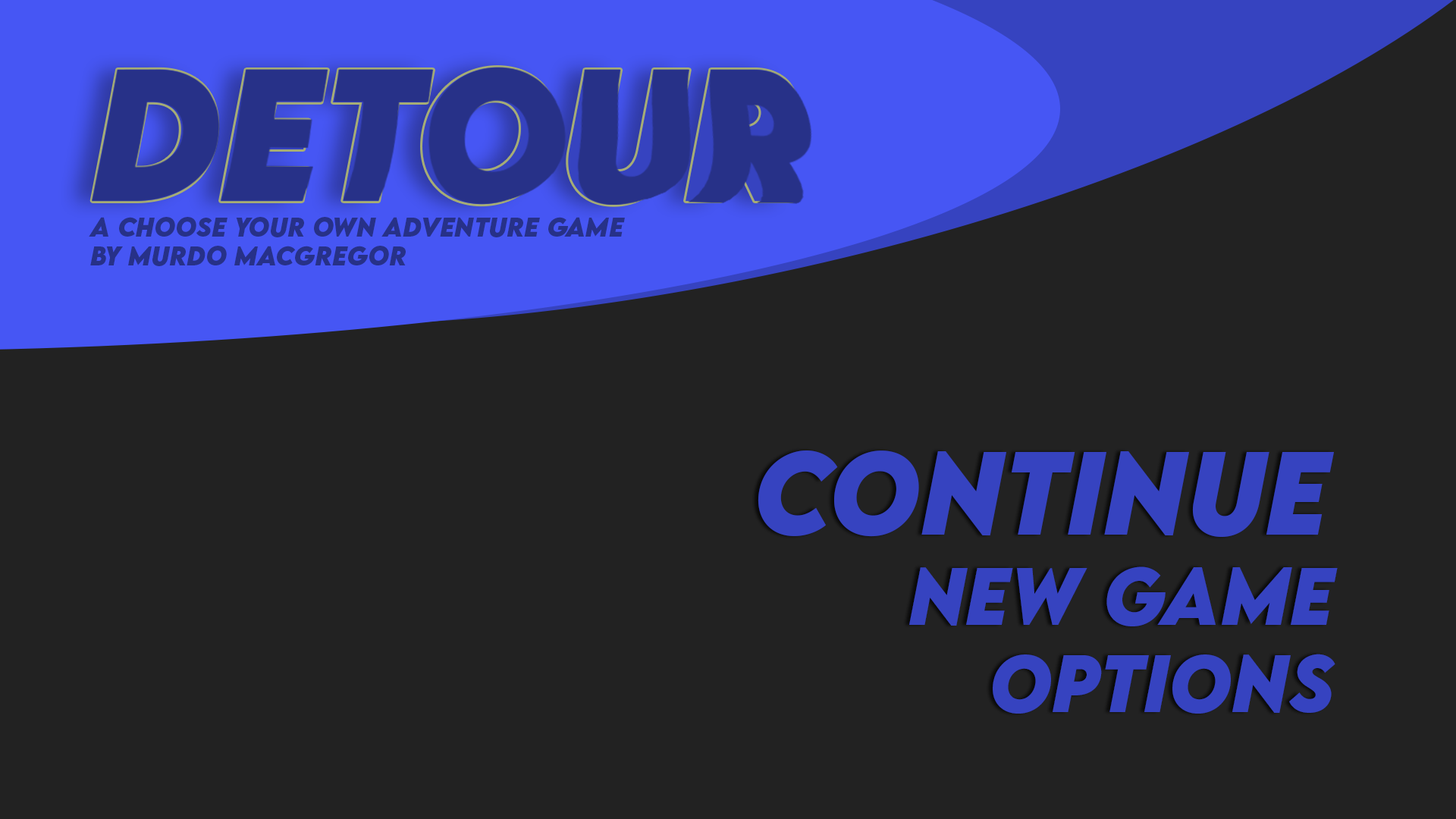
<style>
.page{position:relative;width:1456px;height:819px;background:#222222}
.page>*{position:absolute;margin:0}
.t1{font:167px "LEMONMILK-BoldItalic";color:#273188}
.t2{font:24px "LEMONMILK-BoldItalic";color:#273188}
.t3{font:104.7px "LEMONMILK-BoldItalic";color:#3643c0}
.t4{font:72.3px "LEMONMILK-BoldItalic";color:#3643c0}
</style>
<div class="page">
<p class="t1" style="left:92px;top:67px;width:704px;height:138px">detour</p>
<p class="t2" style="left:89px;top:217px;width:536px;height:49px;text-align:right">a choose your own adventure game<br>by murdo macgregor</p>
<p class="t3" style="left:758px;top:450px;width:576px;height:87px">continue</p>
<p class="t4" style="left:909px;top:566px;width:429px;height:148px">new game<br>options</p>
</div>
